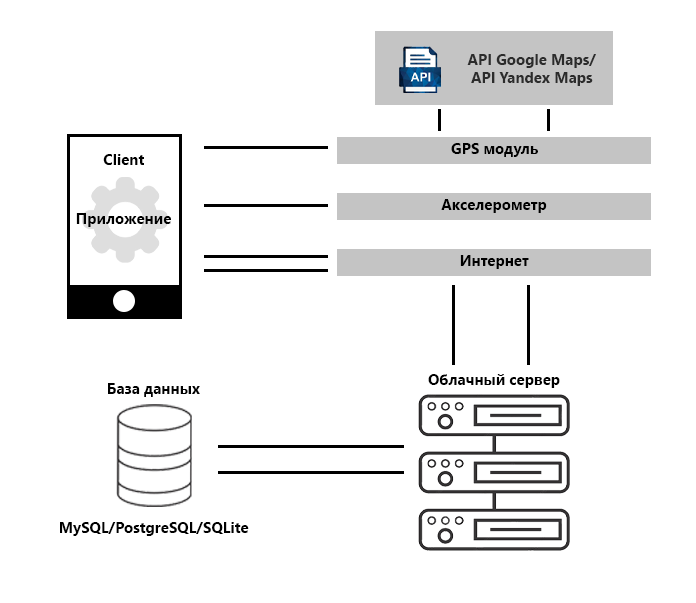
<style>
.page{position:relative;width:696px;height:603px;background:#ffffff}
.page>*{position:absolute;margin:0}
.t1{font:15px "SegoeUI-Bold";color:#2c2c2c}
.t2{font:15px "SegoeUI-Bold";color:#000000}
</style>
<div class="page">
<p class="t1" style="left:467px;top:54px;width:129px;height:32px;text-align:center">API Google Maps/<br>API Yandex Maps</p>
<p class="t2" style="left:451px;top:143px;width:87px;height:14px">GPS модуль</p>
<p class="t2" style="left:103px;top:154px;width:41px;height:11px">Client</p>
<p class="t2" style="left:441px;top:199px;width:106px;height:14px">Акселерометр</p>
<p class="t2" style="left:76px;top:213px;width:95px;height:14px">Приложение</p>
<p class="t2" style="left:460px;top:255px;width:69px;height:14px">Интернет</p>
<p class="t2" style="left:428px;top:374px;width:132px;height:14px">Облачный сервер</p>
<p class="t2" style="left:108px;top:383px;width:92px;height:14px">База данных</p>
<p class="t2" style="left:60px;top:522px;width:189px;height:14px">MySQL/PostgreSQL/SQLite</p>
</div>
